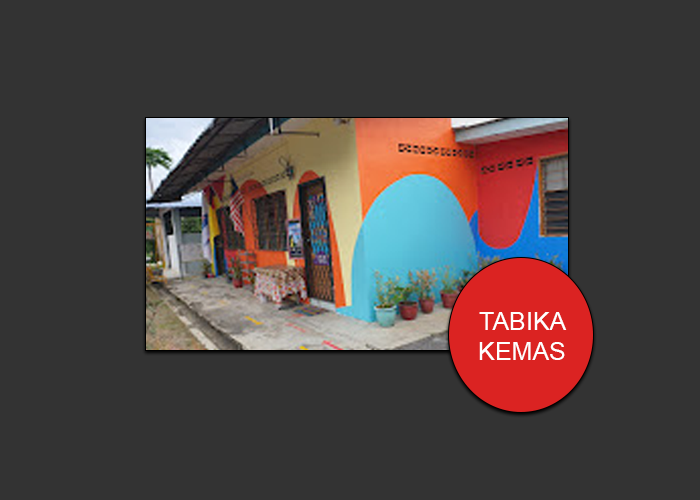
<style>
.page{position:relative;width:700px;height:500px;background:#333333}
.page>*{position:absolute;margin:0}
.t1{font:25px "ArialMT";color:#ffffff}
</style>
<div class="page">
<p class="t1" style="left:479px;top:312px;width:88px;height:48px;text-align:center">TABIKA<br>KEMAS</p>
</div>
